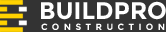
<style>
.page{position:relative;width:166px;height:32px;background:#333333}
.page>*{position:absolute;margin:0}
.t1{font:24px "Montserrat-Bold";color:#ffffff}
.t2{font:9px "Montserrat-Bold";letter-spacing:0.49em;color:#ffffff}
</style>
<div class="page">
<p class="t1" style="left:41px;top:1px;width:125px;height:19px">BUILDPRO</p>
<p class="t2" style="left:41px;top:23px;width:124px;height:7px">CONSTRUCTION</p>
</div>
